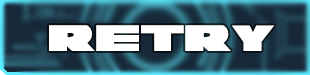
<style>
.page{position:relative;width:310px;height:75px}
.page>*{position:absolute;margin:0}
.t1{font:41.6px "Guardian";color:#ffffff;scale:1.25 1}
</style>
<div class="page">
<p class="t1" style="left:49px;top:25px;width:226px;height:26px">RETRY</p>
</div>
